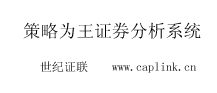
<style>
.page{position:relative;width:217px;height:93px;background:#ffffff}
.page>*{position:absolute;margin:0}
.t1{font:17.8px "SimSun";color:#000000}
.t2{font:12px "SimSun"}
</style>
<div class="page">
<p class="t1" style="left:23px;top:22px;width:178px;height:17px">策略为王证券分析系统</p>
<p class="t2" style="left:40px;top:61px;width:156px;height:12px">世纪证联    www.caplink.cn</p>
</div>
